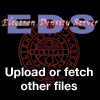
<style>
.page{position:relative;width:100px;height:100px;background:#000000}
.page>*{position:absolute;margin:0}
.t1{font:12px "HelveticaNeue-Bold";color:#ffffff}
</style>
<div class="page">
<p class="t1" style="left:5px;top:67px;width:88px;height:24px;text-align:center">Upload or fetch<br>other files</p>
</div>
